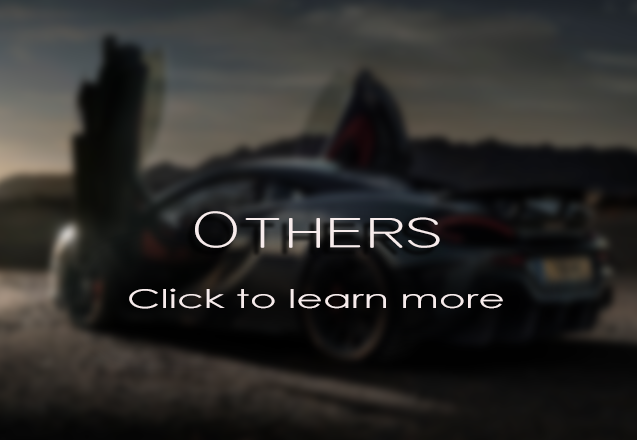
<style>
.page{position:relative;width:637px;height:440px}
.page>*{position:absolute;margin:0}
.t1{font:52.6px "TechnicLite";color:#f7ecec;scale:1.55 1}
.t2{font:25.7px "CenturyGothic";color:#f7ecec;scale:1.6 1}
</style>
<div class="page">
<p class="t1" style="left:195px;top:211px;width:245px;height:37px">Others</p>
<p class="t2" style="left:129px;top:288px;width:374px;height:21px">Click to learn more</p>
</div>
